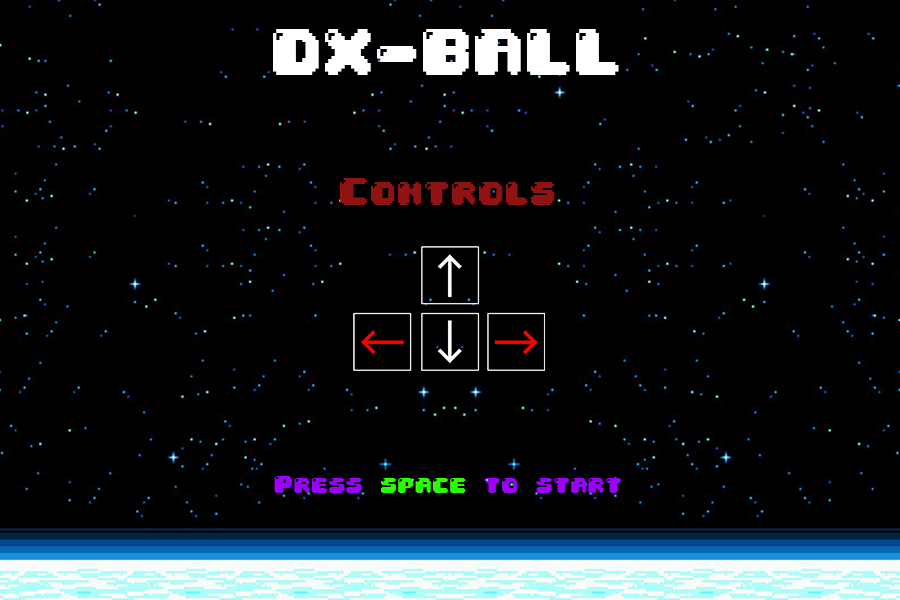
<style>
.page{position:relative;width:900px;height:600px;background:#000000}
.page>*{position:absolute;margin:0}
.t1{font:55.5px "04b30";color:#ffffff}
.t2{font:32.7px "04b30";color:#901313}
.t3{font:21px "04b30";color:#9c00ff}
.t4{font:21px "04b30";color:#2aff00}
</style>
<div class="page">
<p class="t1" style="left:273px;top:29px;width:346px;height:46px">DX-BALL</p>
<p class="t2" style="left:340px;top:178px;width:215px;height:27px">Controls</p>
<p class="t3" style="left:274px;top:476px;width:347px;height:17px">Press <span class="t4">space</span> to start</p>
</div>
